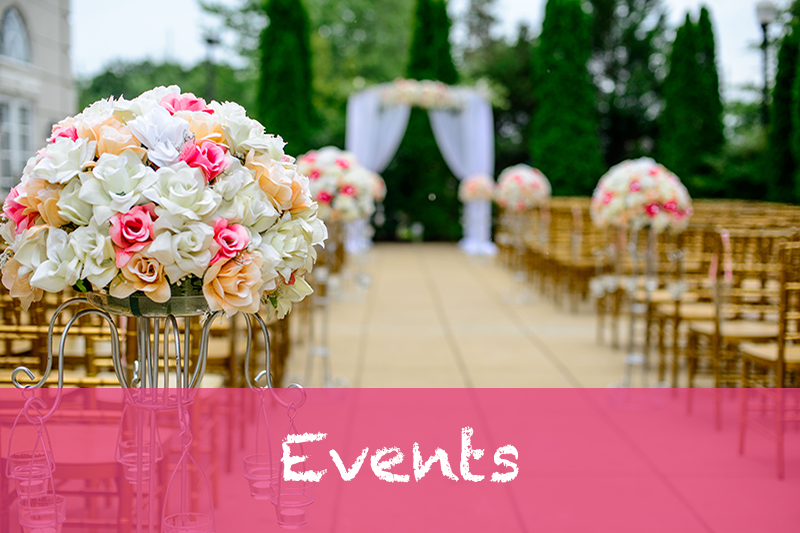
<style>
.page{position:relative;width:800px;height:533px}
.page>*{position:absolute;margin:0}
.t1{font:66.5px "Chalkduster";color:#ffffff}
</style>
<div class="page">
<p class="t1" style="left:280px;top:426px;width:239px;height:57px">Events</p>
</div>
